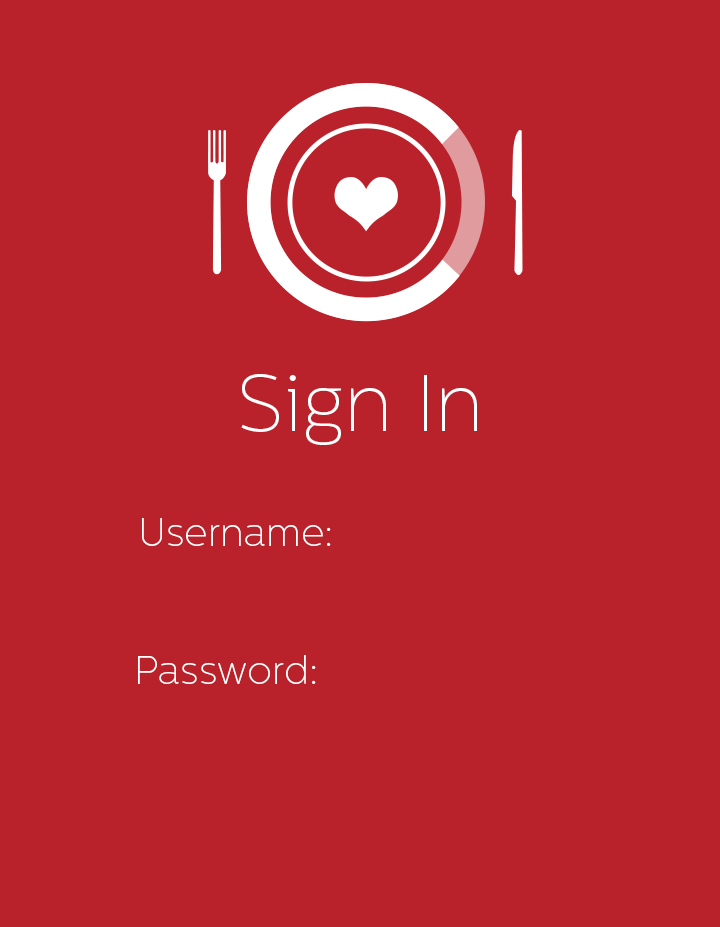
<style>
.page{position:relative;width:720px;height:927px;background:#ba222b}
.page>*{position:absolute;margin:0}
.t1{font:80.3px "CentraleSans-Thin";color:#ffffff}
.t2{font:38.9px "CentraleSans-Thin";color:#ffffff}
</style>
<div class="page">
<p class="t1" style="left:241px;top:374px;width:236px;height:71px">Sign In</p>
<p class="t2" style="left:142px;top:518px;width:189px;height:28px">Username:</p>
<p class="t2" style="left:138px;top:655px;width:178px;height:29px">Password:</p>
</div>
